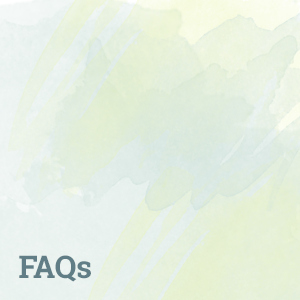
<style>
.page{position:relative;width:300px;height:300px}
.page>*{position:absolute;margin:0}
.t1{font:31px "RobotoSlab-Bold";color:#617d85}
</style>
<div class="page">
<p class="t1" style="left:19px;top:255px;width:72px;height:27px">FAQs</p>
</div>
